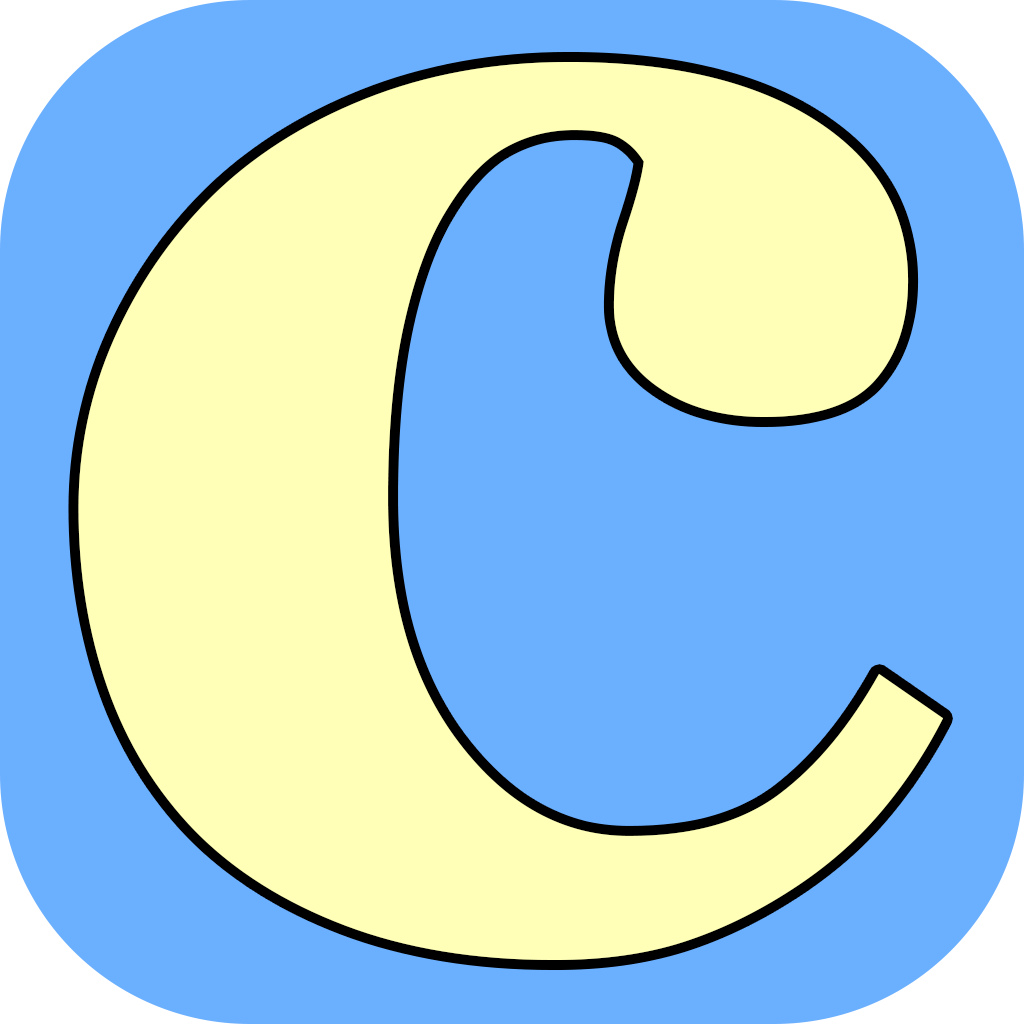
<style>
.page{position:relative;width:1024px;height:1024px;background:#6bafff}
.page>*{position:absolute;margin:0}
.t1{font:1746.4px "Georgia-Bold";color:#ffffb8}
</style>
<div class="page">
<p class="t1" style="left:78px;top:62px;width:865px;height:898px">c</p>
</div>
